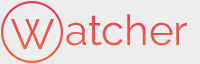
<style>
.page{position:relative;width:200px;height:64px;background:#eeeeee}
.page>*{position:absolute;margin:0}
.t1{font:42px "Raleway-Regular";color:#e9544f}
</style>
<div class="page">
<p class="t1" style="left:66px;top:14px;width:121px;height:32px">atcher</p>
</div>
